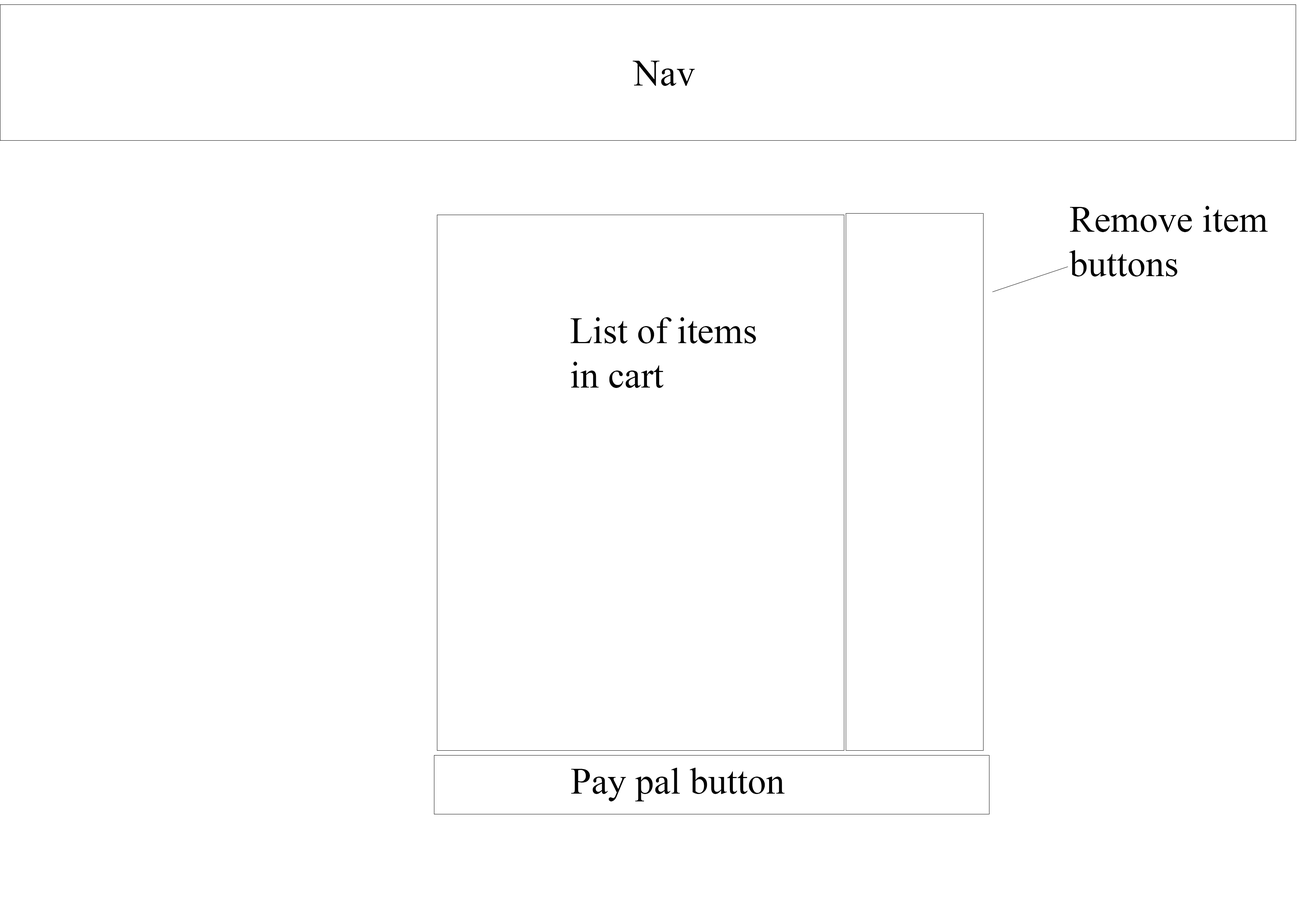
<style>
.page{position:relative;width:1299px;height:918px;background:#ffffff}
.page>*{position:absolute;margin:0}
.t1{font:37px "TimesNewRomanPSMT";color:#000000}
</style>
<div class="page">
<p class="t1" style="left:632px;top:61px;width:63px;height:25px">Nav</p>
<p class="t1" style="left:1069px;top:206px;width:199px;height:71px">Remove item<br>buttons</p>
<p class="t1" style="left:571px;top:317px;width:185px;height:71px">List of items <br>in cart</p>
<p class="t1" style="left:571px;top:768px;width:213px;height:34px">Pay pal button</p>
</div>
